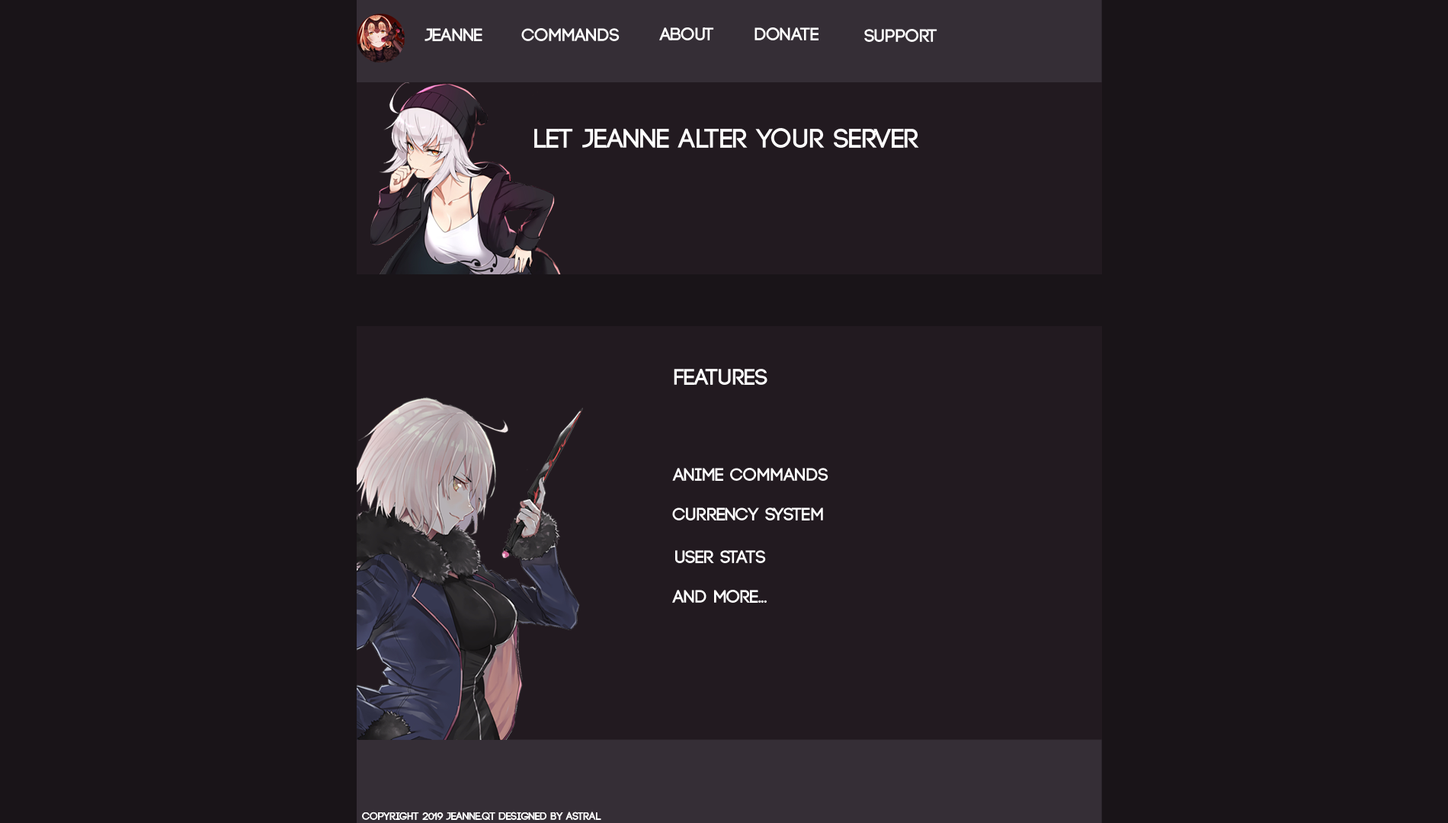
<style>
.page{position:relative;width:1448px;height:823px;background:#191418}
.page>*{position:absolute;margin:0}
.t1{font:18.3px "Code-Bold";color:#ffffff}
.t2{font:27.4px "Code-Bold";color:#ffffff}
.t3{font:22.9px "Code-Bold";color:#ffffff}
.t4{font:10.7px "Code-Bold";color:#ffffff}
</style>
<div class="page">
<p class="t1" style="left:425px;top:28px;width:58px;height:13px">Jeanne</p>
<p class="t1" style="left:521px;top:28px;width:99px;height:13px">commands</p>
<p class="t1" style="left:659px;top:27px;width:55px;height:13px">About</p>
<p class="t1" style="left:755px;top:27px;width:64px;height:13px">Donate</p>
<p class="t1" style="left:864px;top:29px;width:74px;height:13px">Support</p>
<p class="t2" style="left:534px;top:128px;width:385px;height:20px">let jeanne alter your server</p>
<p class="t3" style="left:674px;top:369px;width:94px;height:16px">Features</p>
<p class="t1" style="left:672px;top:468px;width:157px;height:13px">Anime commands</p>
<p class="t1" style="left:672px;top:508px;width:151px;height:13px">Currency system</p>
<p class="t1" style="left:675px;top:550px;width:91px;height:13px">user stats</p>
<p class="t1" style="left:672px;top:590px;width:95px;height:13px">and more...</p>
<p class="t4" style="left:362px;top:812px;width:239px;height:8px">copyright 2019 jeanne.qt designed by astral</p>
</div>
